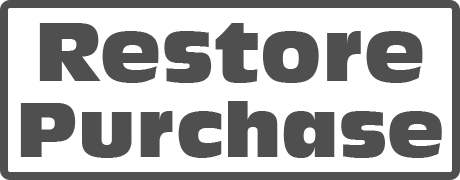
<style>
.page{position:relative;width:460px;height:180px;background:#ffffff}
.page>*{position:absolute;margin:0}
.t1{font:80px "AntiqueOlive-Compact";color:#4f4f4f}
.t2{font:74.7px "AntiqueOlive-Compact";color:#4f4f4f}
</style>
<div class="page">
<p class="t1" style="left:39px;top:23px;width:384px;height:60px">Restore</p>
<p class="t2" style="left:20px;top:101px;width:422px;height:57px">Purchase</p>
</div>
